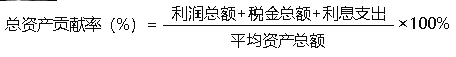
<style>
.page{position:relative;width:456px;height:57px;background:#ffffff}
.page>*{position:absolute;margin:0}
.t1{font:16px "MicrosoftYaHei";letter-spacing:-0.005em;color:#0d0d0d}
</style>
<div class="page">
<p class="t1" style="left:172px;top:6px;width:213px;height:15px">利润总额+税金总额+利息支出</p>
<p class="t1" style="left:5px;top:16px;width:151px;height:17px">总资产贡献率（%）=</p>
<p class="t1" style="left:399px;top:17px;width:50px;height:12px">×100%</p>
<p class="t1" style="left:231px;top:33px;width:94px;height:15px">平均资产总额</p>
</div>
